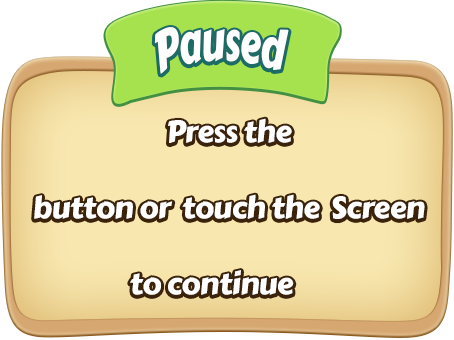
<style>
.page{position:relative;width:454px;height:340px;background:#f8e8b0}
.page>*{position:absolute;margin:0}
.t1{font:57.6px "CarterOne";letter-spacing:-0.02em;color:#ffffff;scale:0.6 1}
.t2{font:30px/38px "CarterOne";letter-spacing:-0.02em;color:#ffffff}
</style>
<div class="page">
<p class="t1" style="left:154px;top:27px;width:135px;height:47px">Paused</p>
<p class="t2" style="left:34px;top:118px;width:391px;height:177px;text-align:center">Press the <br><br>button or  touch the  Screen <br><br>to continue</p>
</div>
